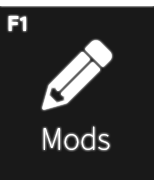
<style>
.page{position:relative;width:154px;height:180px;background:#191919}
.page>*{position:absolute;margin:0}
.t1{font:20.8px "ProductSans-Bold";color:#ffffff}
.t2{font:29.2px "NotoSansCJKkr-Thin";color:#ffffff}
</style>
<div class="page">
<p class="t1" style="left:8px;top:16px;width:18px;height:15px">F1</p>
<p class="t2" style="left:43px;top:126px;width:67px;height:24px">Mods</p>
</div>
